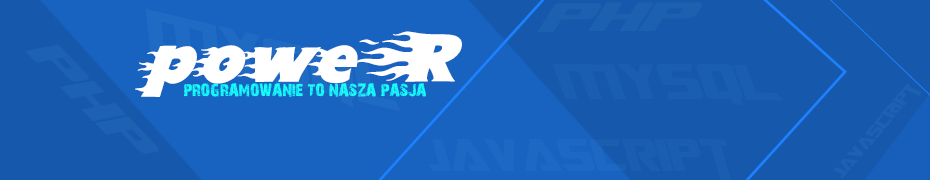
<style>
.page{position:relative;width:930px;height:180px;background:#1658ac}
.page>*{position:absolute;margin:0}
.t1{font:54.5px "TransformersMovie";color:#1c60b0;scale:1.76 1}
.t2{font:67.1px "Blazed";color:#ffffff}
.t3{font:59.6px "TransformersMovie";color:#1a5eaf;scale:1.25 1}
.t4{font:16.9px "28DaysLater";color:#14ffff}
.t5{font:20.6px "TransformersMovie";color:#1d61b2;scale:1.17 1}
</style>
<div class="page">
<p class="t1" style="left:537px;top:2px;width:166px;height:30px">php</p>
<p class="t2" style="left:135px;top:31px;width:327px;height:66px">poweR</p>
<p class="t3" style="left:552px;top:63px;width:231px;height:43px">MYSQL</p>
<p class="t4" style="left:183px;top:83px;width:243px;height:14px">PROGRAMOWANIE TO NASZA PASJA</p>
<p class="t5" style="left:833px;top:83px;width:89px;height:95px;rotate:-50deg">javascript</p>
</div>
